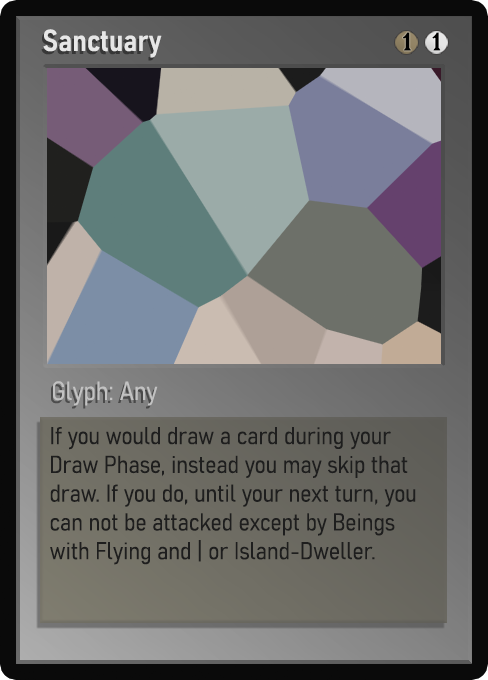
<style>
.page{position:relative;width:488px;height:680px}
.page>*{position:absolute;margin:0}
.t1{font:30px "Bahnschrift-SemiBoldSemiCondensed";color:#f2f2f2;font-weight:bold}
.t2{font:25px "WTRRoycroft";color:#000000;font-weight:bold;scale:1.09 1}
.t3{font:26px "Bahnschrift-LightSemiCondensed";color:#c8c8c8;font-weight:bold}
.t4{font:24px "Bahnschrift-LightSemiCondensed";color:#1e1e1e;font-weight:bold}
</style>
<div class="page">
<p class="t1" style="left:43px;top:29px;width:119px;height:29px;opacity:0.9">Sanctuary</p>
<p class="t2" style="left:403px;top:32px;width:8px;height:19px">1</p>
<p class="t2" style="left:432px;top:32px;width:9px;height:19px">1</p>
<p class="t3" style="left:53px;top:381px;width:105px;height:25px;opacity:0.9">Glyph: Any</p>
<p class="t4" style="left:50px;top:427px;width:366px;height:138px">If you would draw a card during your Draw Phase, instead you may skip that draw. If you do, until your next turn, you can not be attacked except by Beings with Flying and | or Island-Dweller.</p>
</div>
